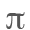
<style>
.page{position:relative;width:30px;height:30px;background:#ffffff}
.page>*{position:absolute;margin:0}
.t1{font:34px "Times-Roman";color:#555555}
</style>
<div class="page">
<p class="t1" style="left:6px;top:12px;width:19px;height:17px">π</p>
</div>
